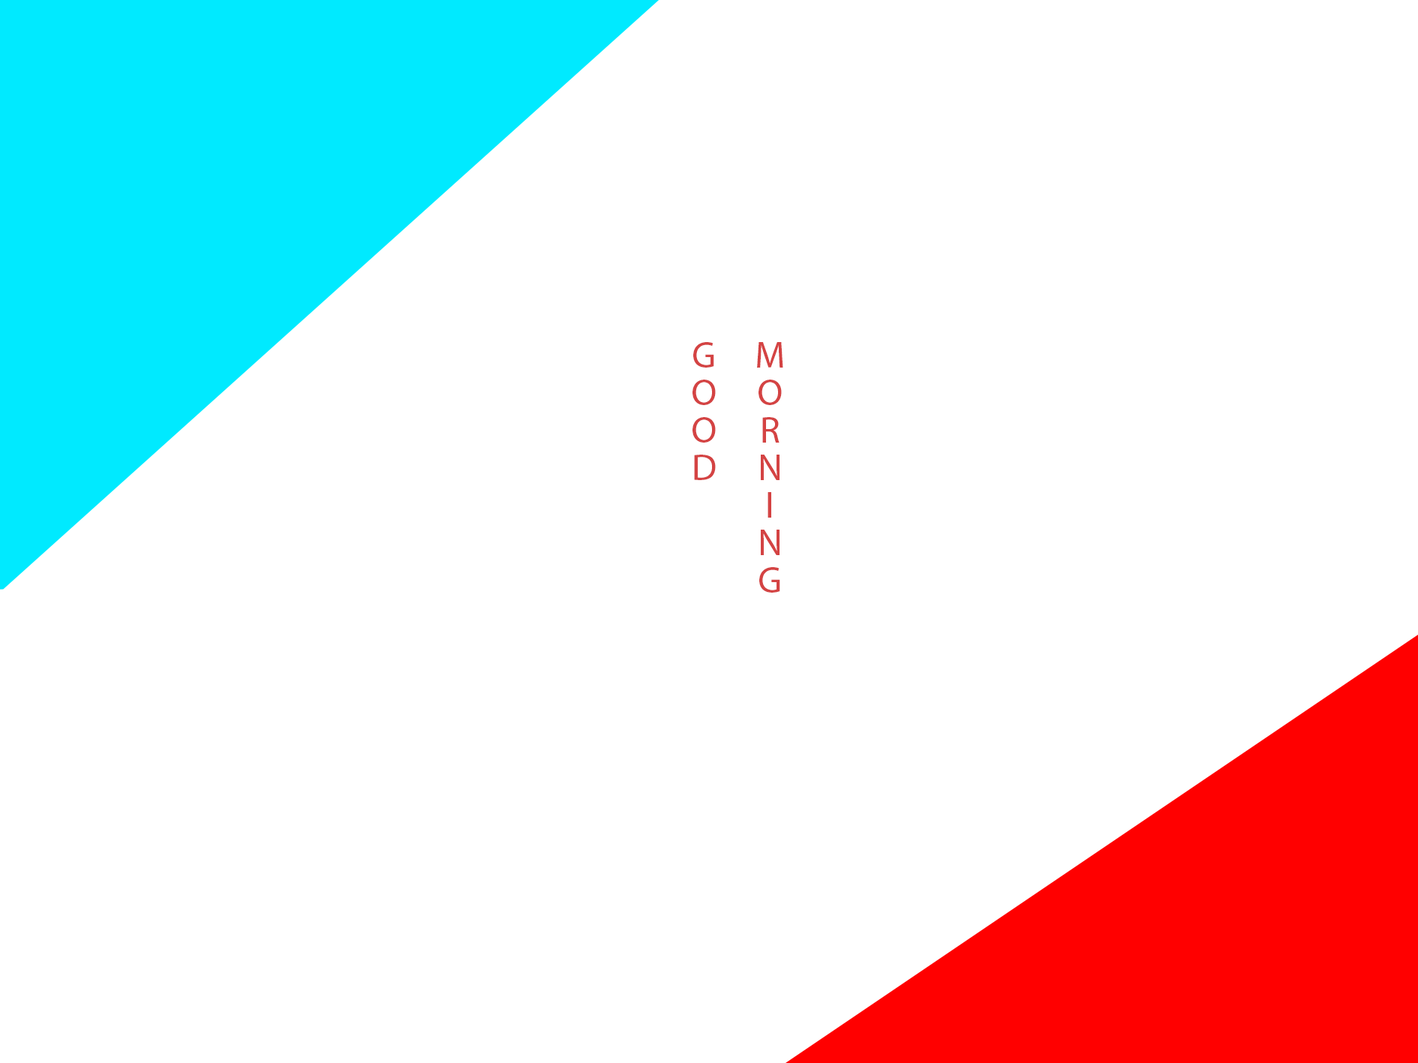
<style>
.page{position:relative;width:1418px;height:1063px;background:#ffffff}
.page>*{position:absolute;margin:0}
.t1{font:9px "MyriadPro-Regular";color:#d44343}
</style>
<div class="page">
<p class="t1" style="left:692px;top:342px;width:91px;height:250px">MORNING<br>GOOD</p>
</div>
